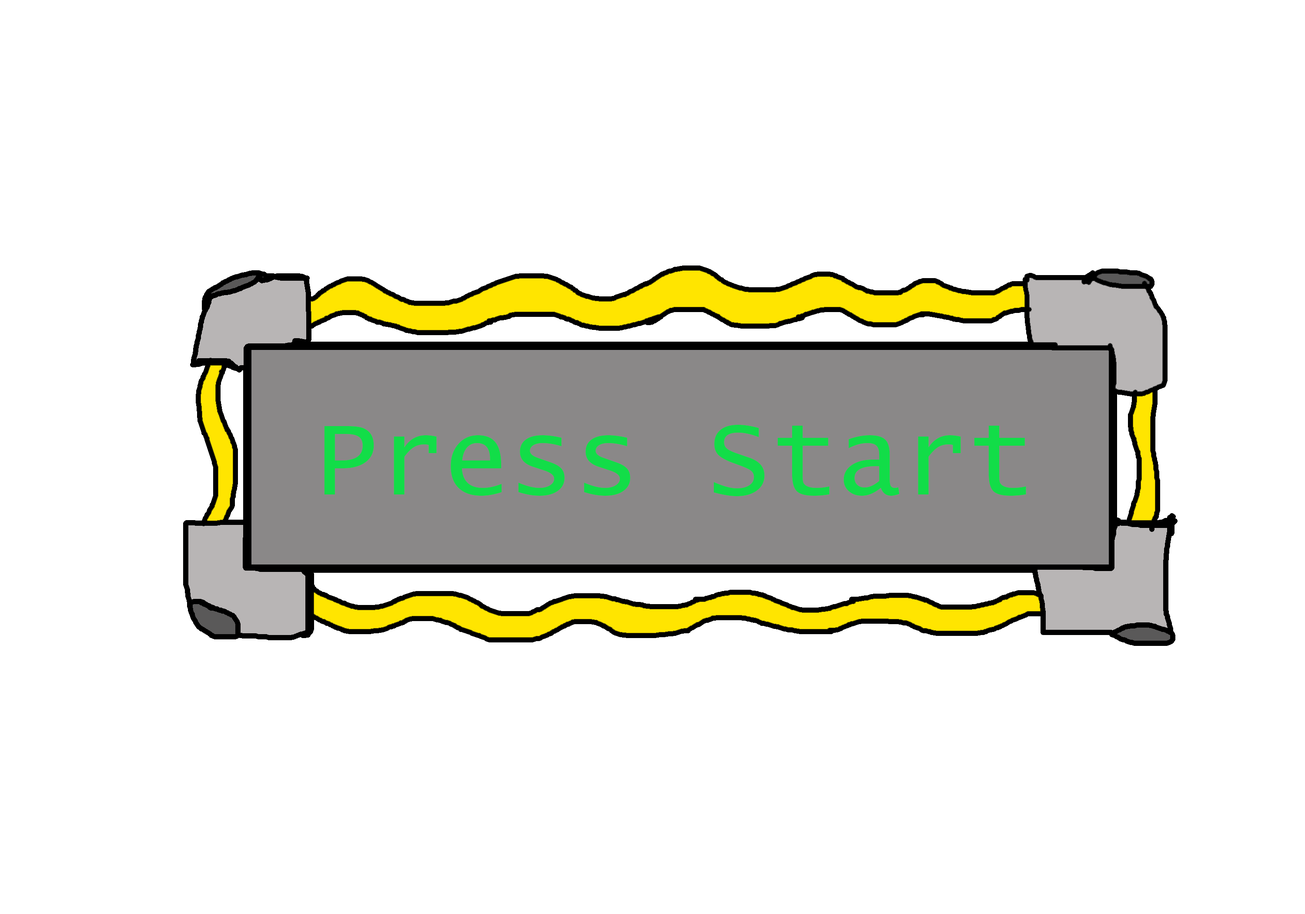
<style>
.page{position:relative;width:1305px;height:914px;background:#ffffff}
.page>*{position:absolute;margin:0}
.t1{font:108.8px "LucidaConsole";color:#12dd48}
</style>
<div class="page">
<p class="t1" style="left:324px;top:425px;width:702px;height:71px">Press Start</p>
</div>
